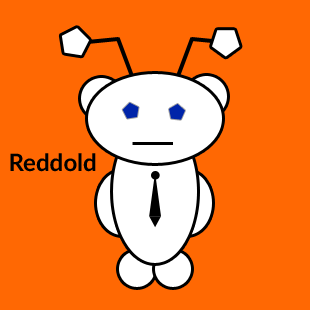
<style>
.page{position:relative;width:310px;height:310px;background:#ff6803}
.page>*{position:absolute;margin:0}
.t1{font:24px "Lato-Bold";color:#000000}
</style>
<div class="page">
<p class="t1" style="left:10px;top:153px;width:86px;height:19px">Reddold</p>
</div>
